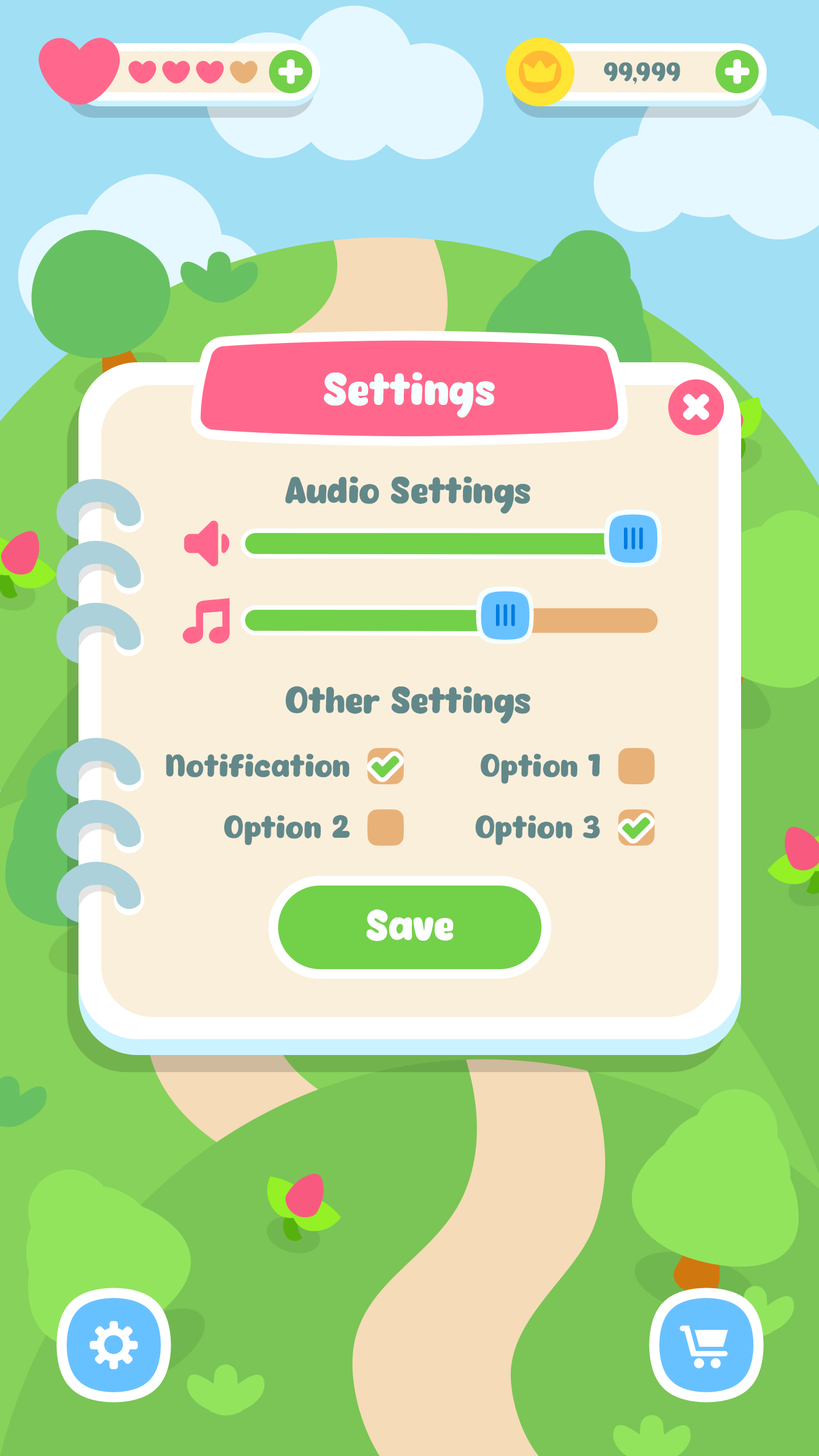
<style>
.page{position:relative;width:819px;height:1456px;background:#faefdb}
.page>*{position:absolute;margin:0}
.t1{font:43.8px "Eazy-Chat";color:#f5ffff}
.t2{font:35.8px "Eazy-Chat";color:#62888a}
.t3{font:30.7px "Eazy-Chat";letter-spacing:0.01em;color:#62888a}
.t4{font:41px "Eazy-Chat";color:#fffeff}
</style>
<div class="page">
<p class="t1" style="left:324px;top:372px;width:171px;height:46px">Settings</p>
<p class="t2" style="left:285px;top:476px;width:246px;height:38px">Audio Settings</p>
<p class="t2" style="left:286px;top:686px;width:245px;height:37px">Other Settings</p>
<p class="t3" style="left:166px;top:754px;width:183px;height:23px">Notification</p>
<p class="t3" style="left:481px;top:754px;width:119px;height:30px">Option 1</p>
<p class="t3" style="left:224px;top:815px;width:126px;height:30px">Option 2</p>
<p class="t3" style="left:475px;top:815px;width:125px;height:30px">Option 3</p>
<p class="t4" style="left:366px;top:909px;width:87px;height:32px">Save</p>
</div>
